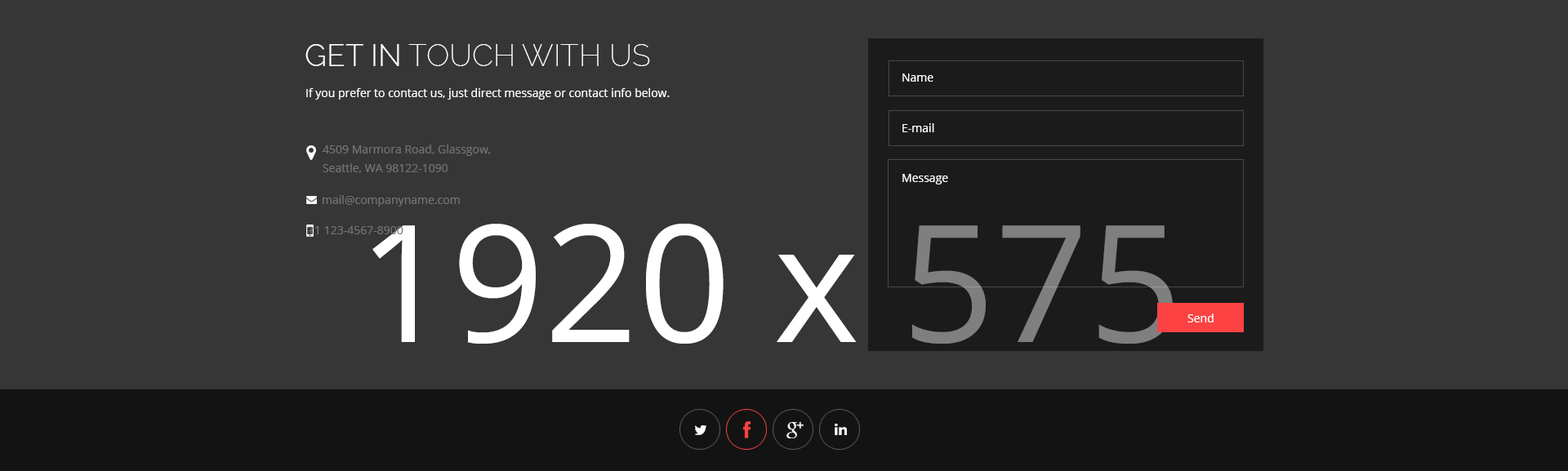
<style>
.page{position:relative;width:1568px;height:471px;background:#363636}
.page>*{position:absolute;margin:0}
.t1{font:30.2px "Raleway-ExtraLight";color:#ffffff;text-transform:uppercase}
.t2{font:30.2px "Raleway-Light";color:#ffffff;text-transform:uppercase}
.t3{font:11.4px "OpenSans";color:#ffffff}
.t4{font:11.4px/18.8px "OpenSans";color:#727272}
.t5{font:11.4px "OpenSans";color:#727272}
.t6{font:163.3px "OpenSans";color:#fefefe}
</style>
<div class="page">
<p class="t1" style="left:305px;top:44px;width:345px;height:22px"><span class="t2">Get in</span> Touch With Us</p>
<p class="t3" style="left:902px;top:74px;width:31px;height:8px">Name</p>
<p class="t3" style="left:306px;top:88px;width:364px;height:12px">If you prefer to contact us, just direct message or contact info below.</p>
<p class="t3" style="left:902px;top:123px;width:32px;height:9px">E-mail</p>
<p class="t4" style="left:323px;top:145px;width:168px;height:28px">4509 Marmora Road, Glassgow, <br>Seattle, WA 98122-1090</p>
<p class="t3" style="left:902px;top:174px;width:46px;height:11px">Message</p>
<p class="t5" style="left:323px;top:195px;width:137px;height:12px">mail@companyname.com</p>
<p class="t5" style="left:308px;top:226px;width:95px;height:8px">+1 123-4567-8900</p>
<p class="t6" style="left:372px;top:224px;width:801px;height:120px">1920 x 575</p>
<p class="t3" style="left:1187px;top:314px;width:27px;height:9px">Send</p>
</div>
